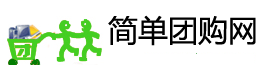
<style>
.page{position:relative;width:270px;height:65px;background:#ffffff}
.page>*{position:absolute;margin:0}
.t1{font:30px "MicrosoftYaHei";color:#000000}
</style>
<div class="page">
<p class="t1" style="left:108px;top:15px;width:148px;height:31px">简单团购网</p>
</div>
